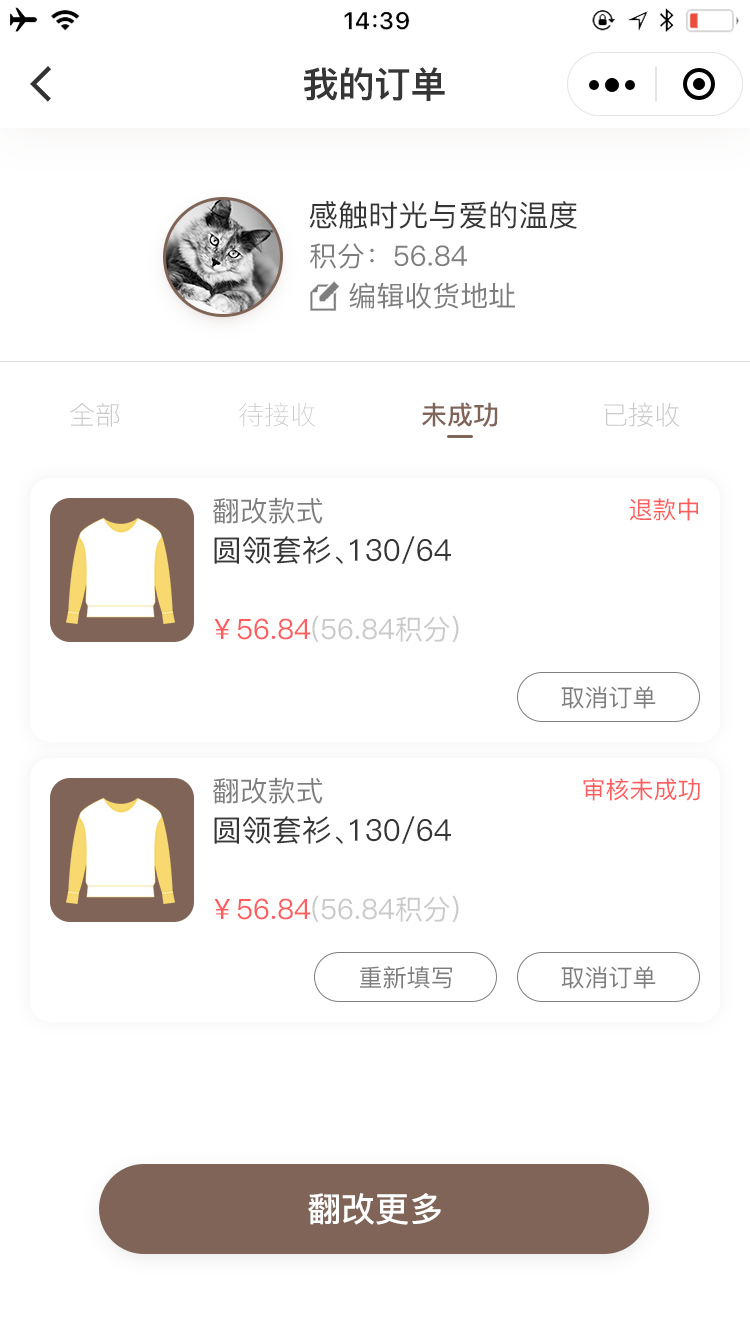
<style>
.page{position:relative;width:750px;height:1334px;background:#ffffff}
.page>*{position:absolute;margin:0}
.t1{font:36px "PingFang-SC-Heavy";color:#363636}
.t2{font:30px "PingFang-SC-Medium";color:#363636}
.t3{font:28px "PingFang-SC-Medium";color:#7e7e7e}
.t4{font:26px "PingFang-SC-Light";color:#cacaca}
.t5{font:26px "PingFang-SC-Bold";color:#806458}
.t6{font:24px "PingFang-SC-Medium";color:#ff5d5d}
.t7{font:28px "PingFang-SC-Medium";color:#cacaca}
.t8{font:28px "PingFang-SC-Medium";color:#ff5d5d}
.t9{font:24px "PingFang-SC-Medium";color:#7e7e7e}
.t10{font:34px "PingFang-SC-Bold";color:#ffffff}
</style>
<div class="page">
<p class="t1" style="left:304px;top:67px;width:141px;height:34px">我的订单</p>
<p class="t2" style="left:309px;top:201px;width:268px;height:28px">感触时光与爱的温度</p>
<p class="t3" style="left:310px;top:243px;width:157px;height:26px">积分：56.84</p>
<p class="t3" style="left:349px;top:282px;width:166px;height:27px">编辑收货地址</p>
<p class="t4" style="left:70px;top:402px;width:50px;height:25px">全部</p>
<p class="t4" style="left:239px;top:402px;width:76px;height:25px">待接收</p>
<p class="t5" style="left:422px;top:402px;width:76px;height:25px">未成功</p>
<p class="t4" style="left:604px;top:402px;width:76px;height:25px">已接收</p>
<p class="t3" style="left:213px;top:497px;width:110px;height:27px">翻改款式</p>
<p class="t6" style="left:629px;top:498px;width:69px;height:23px">退款中</p>
<p class="t2" style="left:214px;top:536px;width:237px;height:28px">圆领套衫、130/64</p>
<p class="t7" style="left:214px;top:615px;width:245px;height:27px"><span class="t8">￥56.84</span>(56.84积分)</p>
<p class="t9" style="left:561px;top:686px;width:95px;height:23px">取消订单</p>
<p class="t3" style="left:213px;top:777px;width:110px;height:27px">翻改款式</p>
<p class="t6" style="left:583px;top:778px;width:117px;height:23px">审核未成功</p>
<p class="t2" style="left:214px;top:816px;width:237px;height:28px">圆领套衫、130/64</p>
<p class="t7" style="left:214px;top:895px;width:245px;height:27px"><span class="t8">￥56.84</span>(56.84积分)</p>
<p class="t9" style="left:360px;top:966px;width:92px;height:23px">重新填写</p>
<p class="t9" style="left:561px;top:966px;width:95px;height:23px">取消订单</p>
<p class="t10" style="left:308px;top:1193px;width:133px;height:32px">翻改更多</p>
</div>
